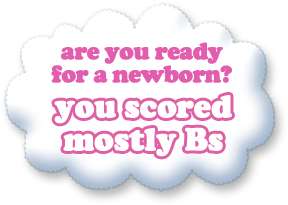
<style>
.page{position:relative;width:288px;height:205px;background:#ffffff}
.page>*{position:absolute;margin:0}
.t1{font:24.8px/23.2px "CooperBlack";letter-spacing:-0.035em;color:#e35dae;font-weight:bold;scale:0.95 1}
.t2{font:33.1px/33.1px "CooperBlack";letter-spacing:-0.01em;color:#ffffff;font-weight:bold;scale:0.95 1}
</style>
<div class="page">
<p class="t1" style="left:51px;top:42px;width:181px;height:41px;text-align:center">are you ready<br>for a newborn?</p>
<p class="t2" style="left:54px;top:95px;width:178px;height:62px;text-align:center">you scored<br>mostly Bs</p>
</div>
